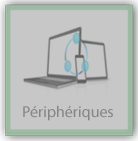
<style>
.page{position:relative;width:138px;height:141px;background:#c7c7c7}
.page>*{position:absolute;margin:0}
.t1{font:15.9px "MyriadPro-Regular";color:#868585}
</style>
<div class="page">
<p class="t1" style="left:23px;top:105px;width:90px;height:16px">Périphériques</p>
</div>
